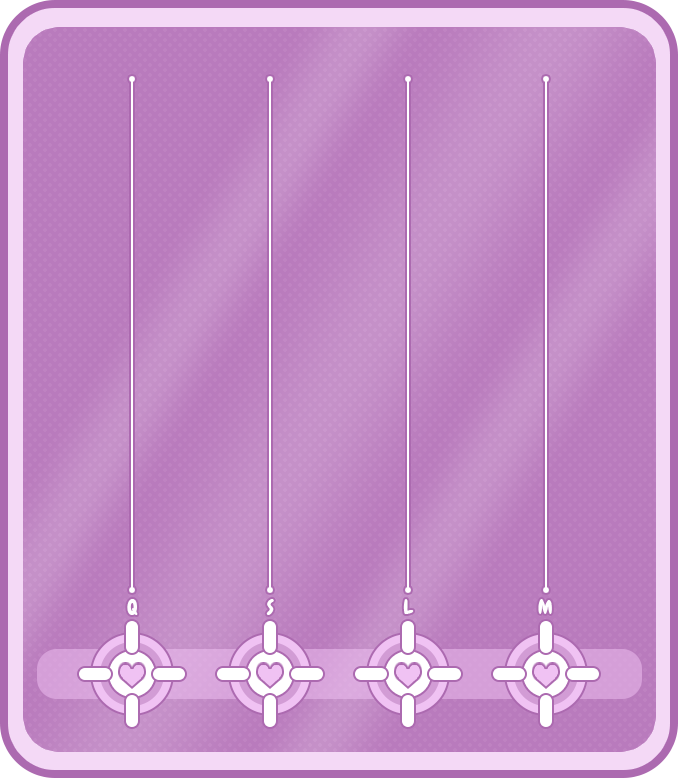
<style>
.page{position:relative;width:678px;height:778px}
.page>*{position:absolute;margin:0}
.t1{font:20px "Chewy-Regular";color:#ffffff}
</style>
<div class="page">
<p class="t1" style="left:127px;top:599px;width:11px;height:16px">Q</p>
<p class="t1" style="left:266px;top:599px;width:8px;height:16px">S</p>
<p class="t1" style="left:403px;top:599px;width:11px;height:15px">L</p>
<p class="t1" style="left:538px;top:599px;width:14px;height:15px">M</p>
</div>
